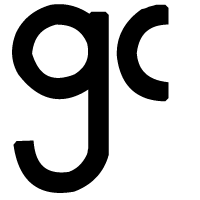
<style>
.page{position:relative;width:200px;height:200px;background:#ffffff}
.page>*{position:absolute;margin:0}
.t1{font:235px "Arctic-Regular";letter-spacing:-0.045em;color:#000000;font-weight:bold}
</style>
<div class="page">
<p class="t1" style="left:12px;top:4px;width:157px;height:189px">gc</p>
</div>
